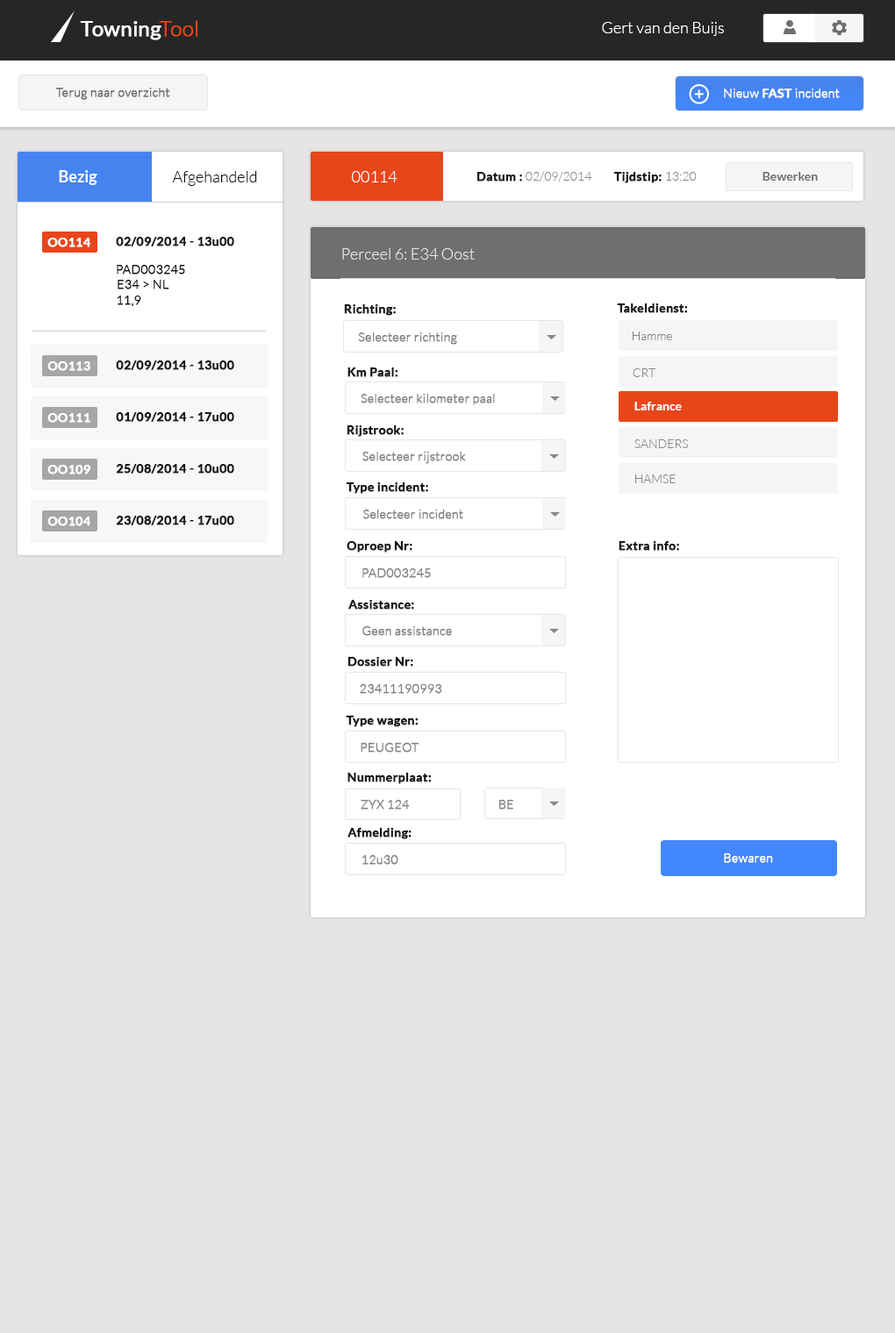
<style>
.page{position:relative;width:895px;height:1333px;background:#e5e5e5}
.page>*{position:absolute;margin:0}
.t1{font:21px "Lato-Regular";letter-spacing:0.005em;color:#ffffff;font-weight:bold}
.t2{font:21px "Lato-Light";letter-spacing:0.005em;color:#e7461b;font-weight:bold}
.t3{font:15.8px "Lato-Light";color:#ffffff}
.t4{font:12.3px "Lato-Light";letter-spacing:0.005em;color:#6f6f6f;font-weight:bold}
.t5{font:12.3px "Lato-Light";letter-spacing:0.005em;color:#ffffff;font-weight:bold}
.t6{font:12.3px "Lato-Bold";letter-spacing:0.005em;color:#ffffff;font-weight:bold}
.t7{font:15.8px "Lato-Bold";color:#ffffff}
.t8{font:15.8px "Lato-Light";color:#0c0c0c}
.t9{font:12.3px "Lato-Light";letter-spacing:0.005em;color:#868685}
.t10{font:12.3px "Lato-Bold";letter-spacing:0.005em;color:#171717;font-weight:bold}
.t11{font:12.3px "Lato-Bold";color:#6f6f6f}
.t12{font:15.8px "Lato-Light";color:#e5e5e5}
.t13{font:12.3px "Lato-Light";letter-spacing:0.005em;color:#171717;font-weight:bold}
.t14{font:12.3px "Lato-Light";letter-spacing:0.005em;color:#868685;font-weight:bold}
.t15{font:12.3px "Lato-Light";color:#868685}
.t16{font:12.3px "Lato-Bold";color:#ffffff}
</style>
<div class="page">
<p class="t1" style="left:80px;top:20px;width:118px;height:20px">Towning<span class="t2">Tool</span></p>
<p class="t3" style="left:602px;top:22px;width:122px;height:14px">Gert van den Buijs</p>
<p class="t4" style="left:55px;top:88px;width:115px;height:12px">Terug naar overzicht</p>
<p class="t5" style="left:724px;top:89px;width:115px;height:9px">Nieuw <span class="t6">FAST </span>incident</p>
<p class="t7" style="left:59px;top:170px;width:38px;height:15px">Bezig</p>
<p class="t8" style="left:172px;top:171px;width:85px;height:15px">Afgehandeld</p>
<p class="t3" style="left:352px;top:171px;width:45px;height:11px">00114</p>
<p class="t9" style="left:476px;top:172px;width:116px;height:10px"><span class="t10">Datum : </span>02/09/2014</p>
<p class="t10" style="left:613px;top:172px;width:83px;height:11px">Tijdstip: <span class="t9">13:20</span></p>
<p class="t11" style="left:762px;top:172px;width:55px;height:9px">Bewerken</p>
<p class="t6" style="left:47px;top:238px;width:44px;height:9px">OO114</p>
<p class="t10" style="left:116px;top:237px;width:118px;height:9px">02/09/2014 - 13u00</p>
<p class="t12" style="left:342px;top:248px;width:132px;height:12px">Perceel 6: E34 Oost</p>
<p class="t13" style="left:117px;top:265px;width:68px;height:9px">PAD003245</p>
<p class="t13" style="left:118px;top:280px;width:51px;height:9px">E34 &gt; NL</p>
<p class="t13" style="left:117px;top:296px;width:24px;height:10px">11,9</p>
<p class="t10" style="left:344px;top:304px;width:52px;height:12px">Richting:</p>
<p class="t10" style="left:617px;top:303px;width:71px;height:10px">Takeldienst:</p>
<p class="t14" style="left:358px;top:332px;width:99px;height:13px">Selecteer richting</p>
<p class="t15" style="left:632px;top:332px;width:40px;height:8px">Hamme</p>
<p class="t6" style="left:47px;top:361px;width:43px;height:10px">OO113</p>
<p class="t10" style="left:116px;top:360px;width:118px;height:10px">02/09/2014 - 13u00</p>
<p class="t10" style="left:347px;top:367px;width:51px;height:10px">Km Paal:</p>
<p class="t15" style="left:632px;top:368px;width:24px;height:9px">CRT</p>
<p class="t14" style="left:360px;top:394px;width:135px;height:11px">Selecteer kilometer paal</p>
<p class="t16" style="left:634px;top:402px;width:47px;height:8px">Lafrance</p>
<p class="t6" style="left:47px;top:413px;width:43px;height:10px">OO111</p>
<p class="t10" style="left:116px;top:412px;width:118px;height:10px">01/09/2014 - 17u00</p>
<p class="t10" style="left:346px;top:425px;width:57px;height:12px">Rijstrook:</p>
<p class="t15" style="left:634px;top:439px;width:54px;height:9px">SANDERS</p>
<p class="t14" style="left:362px;top:452px;width:104px;height:12px">Selecteer rijstrook</p>
<p class="t6" style="left:47px;top:465px;width:43px;height:9px">OO109</p>
<p class="t10" style="left:116px;top:464px;width:118px;height:10px">25/08/2014 - 10u00</p>
<p class="t10" style="left:346px;top:482px;width:82px;height:12px">Type incident:</p>
<p class="t15" style="left:635px;top:474px;width:40px;height:9px">HAMSE</p>
<p class="t14" style="left:363px;top:510px;width:100px;height:9px">Selecteer incident</p>
<p class="t6" style="left:47px;top:517px;width:44px;height:9px">OO104</p>
<p class="t10" style="left:116px;top:516px;width:118px;height:9px">23/08/2014 - 17u00</p>
<p class="t10" style="left:346px;top:541px;width:66px;height:12px">Oproep Nr:</p>
<p class="t10" style="left:618px;top:541px;width:61px;height:10px">Extra info:</p>
<p class="t14" style="left:362px;top:568px;width:69px;height:10px">PAD003245</p>
<p class="t10" style="left:348px;top:600px;width:66px;height:10px">Assistance:</p>
<p class="t14" style="left:362px;top:626px;width:90px;height:10px">Geen assistance</p>
<p class="t10" style="left:347px;top:657px;width:66px;height:10px">Dossier Nr:</p>
<p class="t14" style="left:360px;top:684px;width:82px;height:10px">23411190993</p>
<p class="t10" style="left:346px;top:716px;width:72px;height:11px">Type wagen:</p>
<p class="t14" style="left:360px;top:743px;width:59px;height:9px">PEUGEOT</p>
<p class="t10" style="left:347px;top:773px;width:84px;height:11px">Nummerplaat:</p>
<p class="t14" style="left:360px;top:800px;width:50px;height:9px">ZYX 124</p>
<p class="t14" style="left:499px;top:800px;width:14px;height:9px">BE</p>
<p class="t10" style="left:347px;top:828px;width:64px;height:11px">Afmelding:</p>
<p class="t14" style="left:362px;top:855px;width:36px;height:10px">12u30</p>
<p class="t5" style="left:724px;top:853px;width:49px;height:10px">Bewaren</p>
</div>
